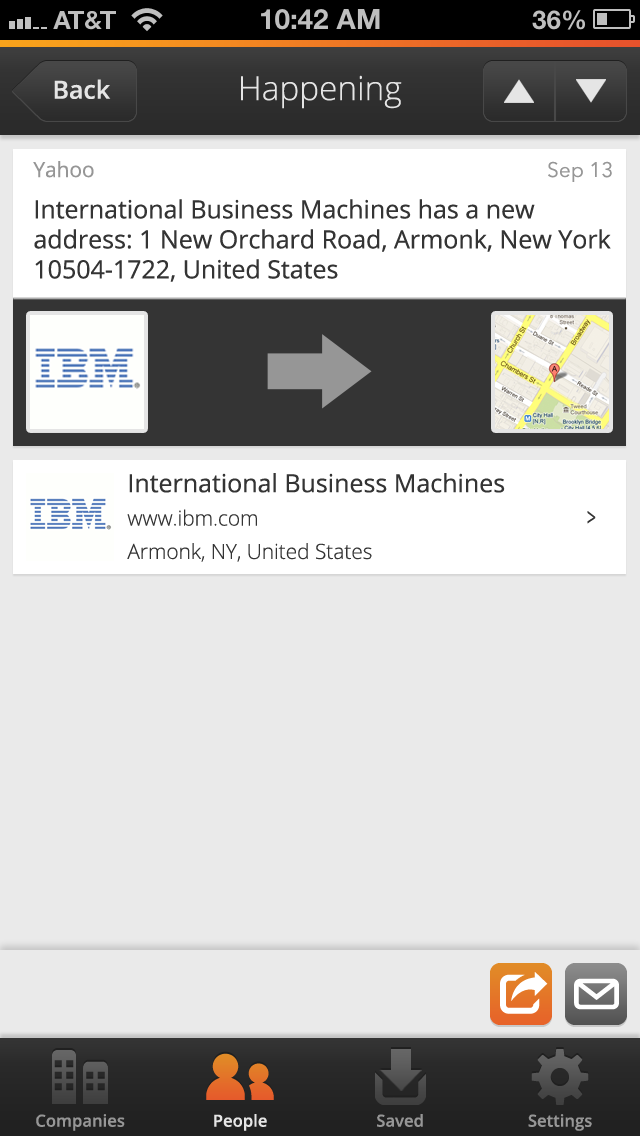
<style>
.page{position:relative;width:640px;height:1136px;background:#eaeaea}
.page>*{position:absolute;margin:0}
.t1{font:33.3px "OpenSans-Light";color:#e5e5e5}
.t2{font:25px "OpenSans-Semibold";color:#e5e5e5}
.t3{font:25px "OpenSans";color:#343434}
.t4{font:20.8px "OpenSans";color:#969696}
.t5{font:20.8px "AvenirNext-Regular";color:#969696}
.t6{font:20.8px "OpenSans-Light";color:#343434}
.t7{font:25px "OpenSans";color:#343434;scale:0.64 1}
.t8{font:16.7px "OpenSans-Semibold";color:#969696}
.t9{font:16.7px "OpenSans-Semibold";color:#e5e5e5}
</style>
<div class="page">
<p class="t1" style="left:241px;top:75px;width:161px;height:34px">Happening</p>
<p class="t2" style="left:54px;top:79px;width:57px;height:20px">Back</p>
<p class="t3" style="left:33px;top:161px;width:578px;height:121px"><span class="t4">Yahoo<br></span>International Business Machines has a new address: 1 New Orchard Road, Armonk, New York 10504-1722, United States</p>
<p class="t5" style="left:548px;top:161px;width:64px;height:21px">Sep 13</p>
<p class="t6" style="left:127px;top:473px;width:378px;height:89px"><span class="t3">International Business Machines<br></span>www.ibm.com<br>Armonk, NY, United States</p>
<p class="t7" style="left:587px;top:511px;width:9px;height:13px">&gt;</p>
<p class="t8" style="left:36px;top:1114px;width:89px;height:17px">Companies</p>
<p class="t9" style="left:214px;top:1114px;width:53px;height:17px">People</p>
<p class="t8" style="left:377px;top:1114px;width:46px;height:13px">Saved</p>
<p class="t8" style="left:528px;top:1114px;width:64px;height:17px">Settings</p>
</div>
